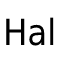
<style>
.page{position:relative;width:64px;height:64px;background:#ffffff}
.page>*{position:absolute;margin:0}
.t1{font:36px "DejaVuSansCondensed";color:#000000}
</style>
<div class="page">
<p class="t1" style="left:6px;top:17px;width:48px;height:29px">Hal</p>
</div>
